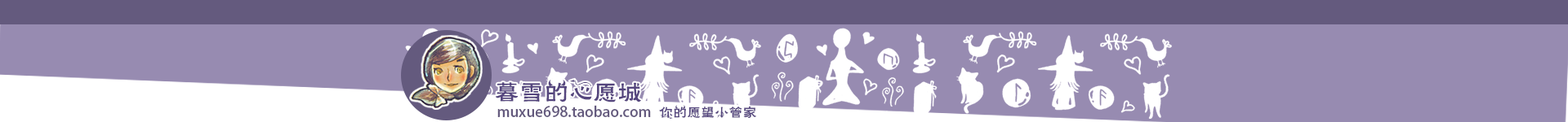
<style>
.page{position:relative;width:1568px;height:122px;background:#978bb1}
.page>*{position:absolute;margin:0}
.t1{font:24.5px "FZHLJW--GB1-0";color:#55467e}
.t2{font:14.7px "AdobeHeitiStd-Regular";color:#645a7e}
.t3{font:13.9px "FZHLJW--GB1-0";color:#55467e}
</style>
<div class="page">
<p class="t1" style="left:496px;top:79px;width:145px;height:24px">暮雪的心愿城</p>
<p class="t2" style="left:497px;top:105px;width:154px;height:13px">muxue698.taobao.com</p>
<p class="t3" style="left:659px;top:105px;width:97px;height:14px">你的愿望小管家</p>
</div>
